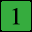
<style>
.page{position:relative;width:32px;height:32px;background:#36ac3e}
.page>*{position:absolute;margin:0}
.t1{font:24px "TimesNewRomanPSMT";color:#000000;scale:1.13 1}
</style>
<div class="page">
<p class="t1" style="left:12px;top:8px;width:8px;height:17px">1</p>
</div>
